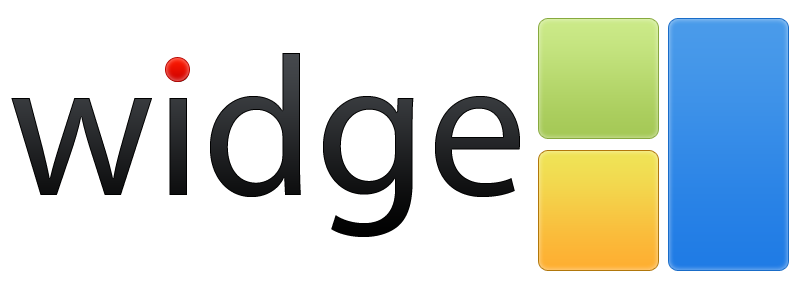
<style>
.page{position:relative;width:800px;height:288px;background:#ffffff}
.page>*{position:absolute;margin:0}
.t1{font:200px "MyriadPro-Regular"}
</style>
<div class="page">
<p class="t1" style="left:11px;top:53px;width:509px;height:184px">widge</p>
</div>
